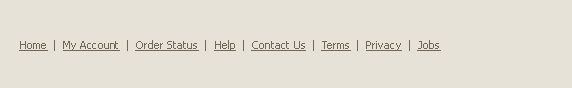
<style>
.page{position:relative;width:572px;height:88px;background:#e7e2d8}
.page>*{position:absolute;margin:0}
.t1{font:11px "Tahoma";letter-spacing:0.005em;color:#716855;text-decoration:underline}
.t2{font:11px "Tahoma";letter-spacing:0.005em;color:#716855}
</style>
<div class="page">
<p class="t1" style="left:19px;top:40px;width:422px;height:11px">Home<span class="t2">  |  </span>My Account<span class="t2">  |  </span>Order Status<span class="t2">  |  </span>Help<span class="t2">  |  </span>Contact Us<span class="t2">  |  </span>Terms<span class="t2">  |  </span>Privacy<span class="t2">  |  </span>Jobs</p>
</div>
